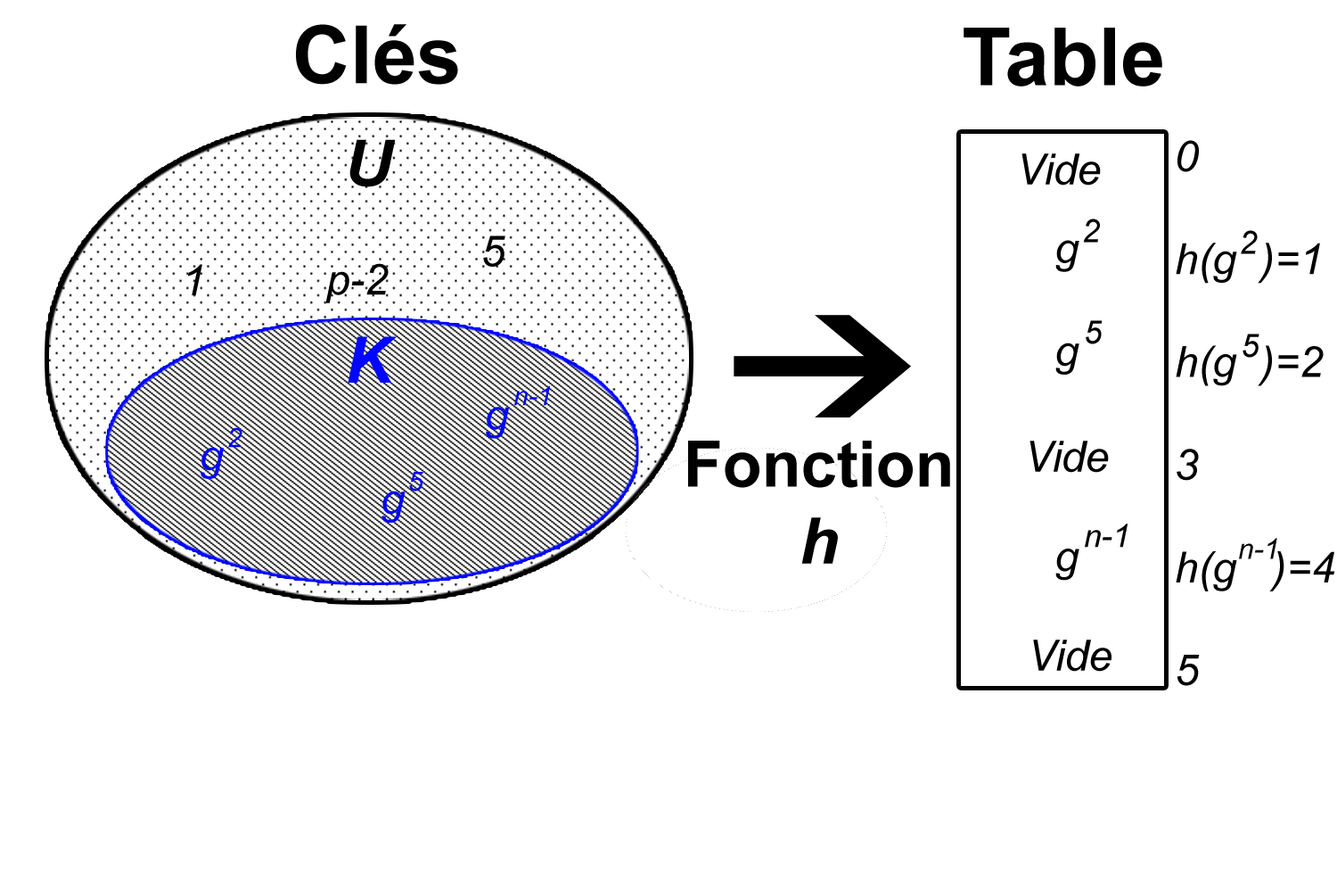
<style>
.page{position:relative;width:1337px;height:892px;background:#ffffff}
.page>*{position:absolute;margin:0}
.t1{font:80.2px "Arial-BoldMT";color:#000000}
.t2{font:64.2px "Arial-BoldItalicMT";color:#000000}
.t3{font:42.8px "Arial-ItalicMT";color:#000000}
.t4{font:32.1px "Arial-ItalicMT";color:#000000}
.t5{font:64.2px "Arial-BoldItalicMT";color:#0006ff}
.t6{font:26.7px "Arial-ItalicMT";color:#0006ff}
.t7{font:42.8px "Arial-ItalicMT";color:#0006ff}
.t8{font:64.2px "Arial-BoldMT";color:#000000}
.t9{font:28.5px "Arial-ItalicMT";color:#000000}
</style>
<div class="page">
<p class="t1" style="left:296px;top:24px;width:162px;height:61px">Clés</p>
<p class="t1" style="left:964px;top:28px;width:199px;height:58px">Table</p>
<p class="t2" style="left:350px;top:139px;width:46px;height:48px">U</p>
<p class="t3" style="left:1176px;top:140px;width:160px;height:546px">0<br><br>h(g  )=1<br><br>h(g  )=2<br><br>3<br><br>h(g   )=4<br><br>5</p>
<p class="t3" style="left:1022px;top:153px;width:79px;height:32px">Vide</p>
<p class="t4" style="left:1083px;top:218px;width:17px;height:25px">2</p>
<p class="t4" style="left:1241px;top:230px;width:17px;height:24px">2</p>
<p class="t3" style="left:483px;top:235px;width:23px;height:32px">5</p>
<p class="t3" style="left:1056px;top:240px;width:24px;height:340px">g<br><br>g<br><br><br><br>g</p>
<p class="t3" style="left:188px;top:264px;width:14px;height:31px">1</p>
<p class="t3" style="left:325px;top:263px;width:64px;height:40px">p-2</p>
<p class="t4" style="left:1086px;top:320px;width:17px;height:24px">5</p>
<p class="t5" style="left:348px;top:336px;width:49px;height:46px">K</p>
<p class="t4" style="left:1243px;top:333px;width:17px;height:25px">5</p>
<p class="t6" style="left:514px;top:385px;width:37px;height:21px">n-1</p>
<p class="t7" style="left:486px;top:407px;width:24px;height:32px">g</p>
<p class="t6" style="left:228px;top:427px;width:15px;height:21px">2</p>
<p class="t7" style="left:201px;top:447px;width:24px;height:32px">g</p>
<p class="t8" style="left:688px;top:440px;width:262px;height:123px;text-align:center">Fonction<br><span class="t2">h</span></p>
<p class="t3" style="left:1030px;top:440px;width:79px;height:33px">Vide</p>
<p class="t6" style="left:409px;top:472px;width:15px;height:19px">5</p>
<p class="t7" style="left:382px;top:490px;width:24px;height:32px">g</p>
<p class="t4" style="left:1085px;top:523px;width:44px;height:24px">n-1</p>
<p class="t9" style="left:1239px;top:538px;width:39px;height:21px">n-1</p>
<p class="t3" style="left:1033px;top:639px;width:79px;height:32px">Vide</p>
</div>
